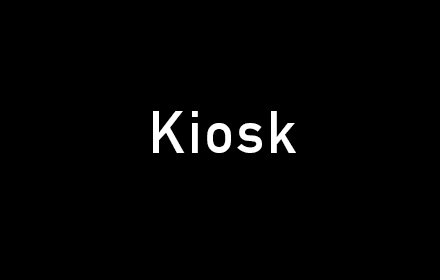
<style>
.page{position:relative;width:440px;height:280px;background:#000000}
.page>*{position:absolute;margin:0}
.t1{font:57.9px "DINMittelschrift";letter-spacing:0.06em;color:#ffffff}
</style>
<div class="page">
<p class="t1" style="left:153px;top:111px;width:143px;height:42px">Kiosk</p>
</div>
